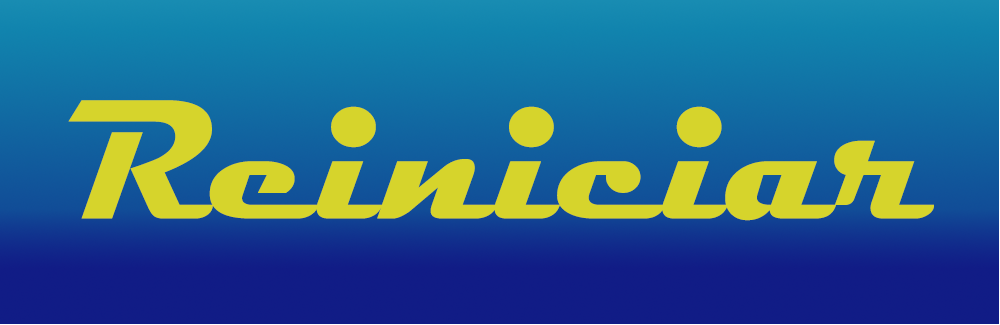
<style>
.page{position:relative;width:1000px;height:325px}
.page>*{position:absolute;margin:0}
.t1{font:171.9px "Magneto-Bold";color:#d6d42c}
</style>
<div class="page">
<p class="t1" style="left:68px;top:100px;width:866px;height:121px">Reiniciar</p>
</div>
